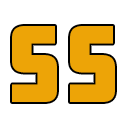
<style>
.page{position:relative;width:128px;height:128px;background:#ffffff}
.page>*{position:absolute;margin:0}
.t1{font:95px "Amboy-Black";letter-spacing:0.06em;color:#eda407}
</style>
<div class="page">
<p class="t1" style="left:12px;top:26px;width:103px;height:76px">SS</p>
</div>
